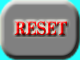
<style>
.page{position:relative;width:80px;height:60px;background:#808080}
.page>*{position:absolute;margin:0}
.t1{font:18px "MyungjoXB-HM"}
</style>
<div class="page">
<p class="t1" style="left:14px;top:21px;width:53px;height:14px">RESET</p>
</div>
